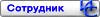
<style>
.page{position:relative;width:100px;height:17px}
.page>*{position:absolute;margin:0}
.t1{font:9px "MicrosoftSansSerif";color:#0c00ff;font-weight:bold;scale:1.2 1}
</style>
<div class="page">
<p class="t1" style="left:7px;top:4px;width:57px;height:9px">Сотрудник</p>
</div>
